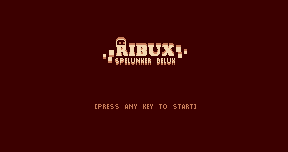
<style>
.page{position:relative;width:288px;height:152px;background:#3c0000}
.page>*{position:absolute;margin:0}
.t1{font:16px "CooperBits";color:#f5d7af}
.t2{font:16px "CooperBits"}
.t3{font:16px "Pixels"}
.t4{font:16px "Pixels";color:#f5d7af}
.t5{font:16px "Pixels";color:#c87d5a}
</style>
<div class="page">
<p class="t1" style="left:116px;top:44px;width:58px;height:11px">RIBUX</p>
<p class="t2" style="left:116px;top:43px;width:58px;height:11px">RIBUX</p>
<p class="t1" style="left:116px;top:45px;width:58px;height:11px">RIBUX</p>
<p class="t3" style="left:115px;top:59px;width:60px;height:5px">Spelunker Delux</p>
<p class="t3" style="left:115px;top:60px;width:60px;height:5px">Spelunker Delux</p>
<p class="t4" style="left:115px;top:58px;width:60px;height:5px">Spelunker Delux</p>
<p class="t5" style="left:95px;top:104px;width:101px;height:5px">[PRESS ANY KEY TO START]</p>
</div>
